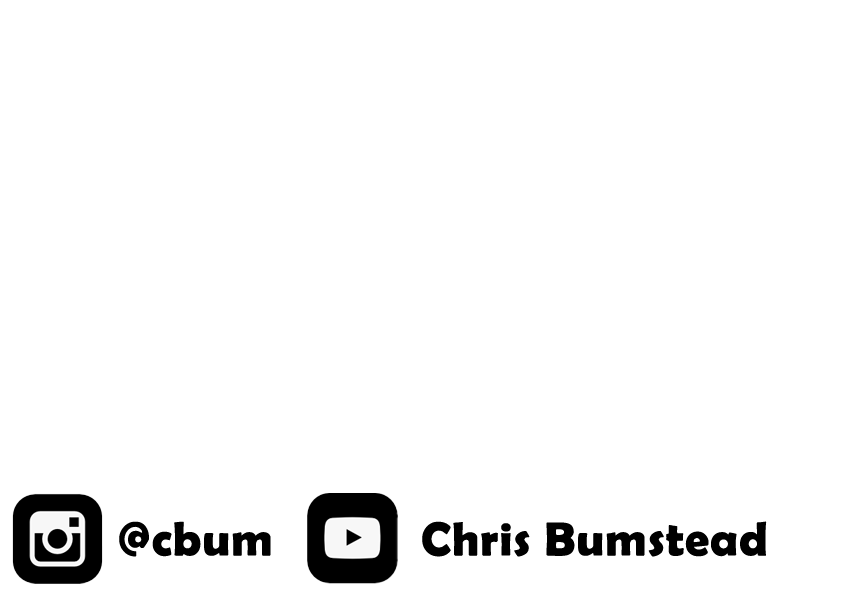
<style>
.page{position:relative;width:842px;height:595px;background:#ffffff}
.page>*{position:absolute;margin:0}
.t1{font:48px "BerlinSansFBDemi-Bold";letter-spacing:0.02em;color:#000000}
</style>
<div class="page">
<p class="t1" style="left:119px;top:521px;width:152px;height:36px">@cbum</p>
<p class="t1" style="left:422px;top:521px;width:345px;height:36px">Chris Bumstead</p>
</div>
